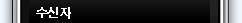
<style>
.page{position:relative;width:242px;height:23px}
.page>*{position:absolute;margin:0}
.t1{font:12px "H2gtrE";letter-spacing:-0.05em;color:#fcfcfe}
</style>
<div class="page">
<p class="t1" style="left:36px;top:7px;width:35px;height:12px">수신자</p>
</div>
